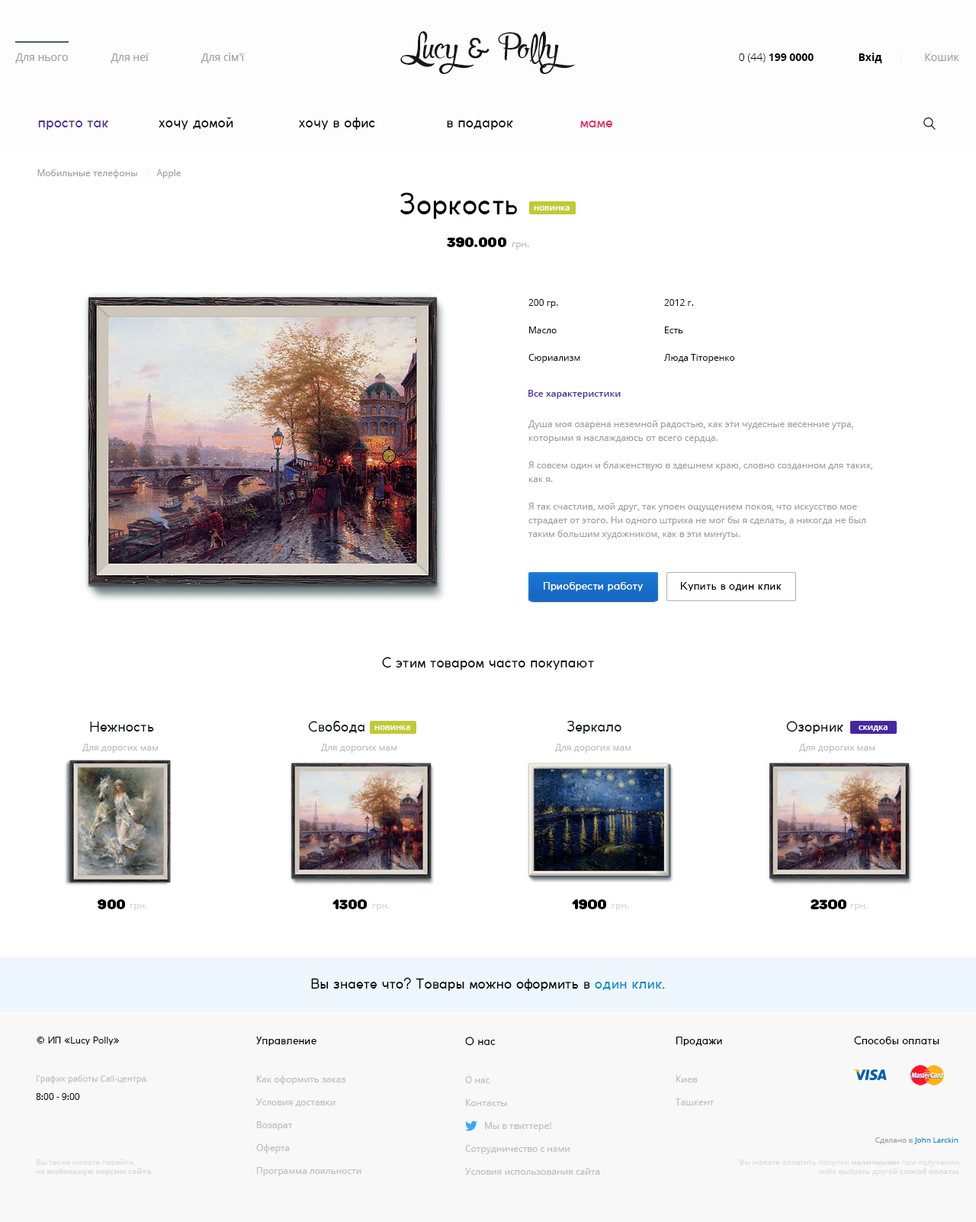
<style>
.page{position:relative;width:976px;height:1222px;background:#ffffff}
.page>*{position:absolute;margin:0}
.t1{font:27.5px "RupsterScriptFree";letter-spacing:-0.05em;color:#000000}
.t2{font:27.5px "CocoGothic";letter-spacing:-0.05em;color:#000000}
.t3{font:10.7px "OpenSans";color:#9e9e9e}
.t4{font:10.7px "OpenSans-Bold";color:#000000}
.t5{font:10.7px "OpenSans-Light";color:#000000}
.t6{font:13.7px "CocoGothic";color:#4527a0}
.t7{font:13.7px "CocoGothic";color:#000000}
.t8{font:13.7px "CocoGothic";color:#e91e63}
.t9{font:9.2px "OpenSans";color:#9e9e9e}
.t10{font:27.5px "CocoGothic";color:#000000}
.t11{font:8.4px "OpenSans-Semibold";color:#ffffff}
.t12{font:13.7px "RoundsBlack";color:#000000}
.t13{font:9.2px "OpenSans";color:#bdbdbd}
.t14{font:9.2px/13.7px "OpenSans";color:#0d1214}
.t15{font:9.2px/13.7px "OpenSans";color:#0c1012}
.t16{font:9.2px "OpenSans-Semibold";color:#4527a0}
.t17{font:9.2px/13.7px "OpenSans";color:#9e9e9e}
.t18{font:10.7px "CocoGothic";color:#ffffff}
.t19{font:10.7px "CocoGothic";color:#000000}
.t20{font:9.2px "OpenSans";color:#d4d4d4}
.t21{font:13.7px "CocoGothic";color:#0288d1}
.t22{font:9.2px "CocoGothic";color:#000000}
.t23{font:8.4px "OpenSans";color:#bdbdbd}
.t24{font:9.2px/22.9px "OpenSans";color:#bdbdbd}
.t25{font:9.2px "OpenSans";color:#000000}
.t26{font:7.6px "OpenSans";color:#0288d1}
.t27{font:7.6px "OpenSans";color:#9e9e9e}
.t28{font:7.6px "OpenSans";color:#dcdcdc}
.t29{font:7.6px "OpenSans-Bold";color:#dcdcdc}
</style>
<div class="page">
<p class="t1" style="left:400px;top:31px;width:175px;height:43px;opacity:0.96">Lucy <span class="t2">&amp;</span> Polly</p>
<p class="t3" style="left:15px;top:53px;width:53px;height:10px">Для нього</p>
<p class="t3" style="left:111px;top:53px;width:38px;height:10px">Для неї</p>
<p class="t3" style="left:201px;top:53px;width:44px;height:10px">Для сім'ї</p>
<p class="t4" style="left:739px;top:53px;width:75px;height:10px"><span class="t5">0 (44) </span>199 0000</p>
<p class="t4" style="left:859px;top:53px;width:23px;height:10px">Вхід</p>
<p class="t3" style="left:925px;top:53px;width:34px;height:8px">Кошик</p>
<p class="t6" style="left:38px;top:120px;width:70px;height:10px">просто так</p>
<p class="t7" style="left:159px;top:117px;width:74px;height:13px">хочу домой</p>
<p class="t7" style="left:299px;top:117px;width:76px;height:13px">хочу в офис</p>
<p class="t7" style="left:447px;top:120px;width:66px;height:10px">в подарок</p>
<p class="t8" style="left:580px;top:120px;width:33px;height:8px">маме</p>
<p class="t9" style="left:37px;top:169px;width:144px;height:9px">Мобильные телефоны        Apple</p>
<p class="t10" style="left:400px;top:192px;width:117px;height:27px">Зоркость</p>
<p class="t11" style="left:534px;top:206px;width:36px;height:4px">новинка</p>
<p class="t12" style="left:447px;top:237px;width:59px;height:10px">390.000</p>
<p class="t13" style="left:512px;top:242px;width:17px;height:7px">грн.</p>
<p class="t14" style="left:528px;top:299px;width:52px;height:64px">200 гр.<br><br>Масло<br><br>Сюриализм</p>
<p class="t15" style="left:663px;top:299px;width:72px;height:64px">2012 г.<br><br>Есть<br><br>Люда Тiторенко</p>
<p class="t16" style="left:528px;top:390px;width:93px;height:9px">Все характеристики</p>
<p class="t17" style="left:528px;top:420px;width:345px;height:119px">Душа моя озарена неземной радостью, как эти чудесные весенние утра, которыми я наслаждаюсь от всего сердца. <br><br>Я совсем один и блаженствую в здешнем краю, словно созданном для таких, как я. <br><br>Я так счастлив, мой друг, так упоен ощущением покоя, что искусство мое страдает от этого. Ни одного штриха не мог бы я сделать, а никогда не был таким большим художником, как в эти минуты.</p>
<p class="t18" style="left:544px;top:582px;width:100px;height:9px">Приобрести работу</p>
<p class="t19" style="left:681px;top:582px;width:101px;height:9px">Купить в один клик</p>
<p class="t7" style="left:382px;top:657px;width:212px;height:13px">С этим товаром часто покупают</p>
<p class="t7" style="left:90px;top:721px;width:64px;height:11px">Нежность</p>
<p class="t7" style="left:308px;top:721px;width:57px;height:12px">Свобода</p>
<p class="t11" style="left:374px;top:725px;width:36px;height:5px">новинка</p>
<p class="t7" style="left:567px;top:721px;width:54px;height:13px">Зеркало</p>
<p class="t7" style="left:786px;top:721px;width:57px;height:13px">Озорник</p>
<p class="t11" style="left:859px;top:725px;width:29px;height:6px">скидка</p>
<p class="t13" style="left:82px;top:744px;width:77px;height:9px">Для дорогих мам</p>
<p class="t13" style="left:321px;top:744px;width:76px;height:9px">Для дорогих мам</p>
<p class="t13" style="left:555px;top:744px;width:76px;height:9px">Для дорогих мам</p>
<p class="t13" style="left:799px;top:744px;width:76px;height:9px">Для дорогих мам</p>
<p class="t12" style="left:98px;top:899px;width:27px;height:10px">900</p>
<p class="t20" style="left:130px;top:904px;width:17px;height:7px">грн.</p>
<p class="t12" style="left:332px;top:899px;width:35px;height:10px">1300</p>
<p class="t20" style="left:372px;top:904px;width:18px;height:7px">грн.</p>
<p class="t12" style="left:572px;top:899px;width:34px;height:10px">1900</p>
<p class="t20" style="left:612px;top:904px;width:17px;height:7px">грн.</p>
<p class="t12" style="left:811px;top:899px;width:35px;height:10px">2300</p>
<p class="t20" style="left:850px;top:904px;width:18px;height:7px">грн.</p>
<p class="t7" style="left:311px;top:977px;width:354px;height:14px">Вы знаете что? Товары можно оформить в<span class="t21"> один клик.</span></p>
<p class="t22" style="left:37px;top:1036px;width:83px;height:9px">© ИП «Lucy Polly»</p>
<p class="t19" style="left:256px;top:1036px;width:60px;height:9px">Управление</p>
<p class="t19" style="left:465px;top:1036px;width:31px;height:9px">О нас</p>
<p class="t19" style="left:676px;top:1036px;width:46px;height:9px">Продажи</p>
<p class="t19" style="left:854px;top:1036px;width:85px;height:9px">Способы оплаты</p>
<p class="t23" style="left:37px;top:1075px;width:111px;height:9px">График работы Call-центра.</p>
<p class="t24" style="left:256px;top:1075px;width:105px;height:101px">Как оформить заказ<br>Условия доставки<br>Возврат<br>Оферта<br>Программа лояльности</p>
<p class="t24" style="left:465px;top:1076px;width:135px;height:98px">О нас<br>Контакты<br>        Мы в твиттере!<br>Сотрудничество с нами<br>Условия использования сайта</p>
<p class="t24" style="left:676px;top:1075px;width:38px;height:30px">Киев<br>Ташкент</p>
<p class="t25" style="left:36px;top:1093px;width:44px;height:7px">8:00 - 9:00</p>
<p class="t26" style="left:875px;top:1137px;width:84px;height:7px"><span class="t27">Сделано в</span> John Larckin</p>
<p class="t28" style="left:36px;top:1158px;width:117px;height:17px">Вы также можете перейти, <br>на <span class="t29">мобильную версию сайта.</span></p>
<p class="t28" style="left:740px;top:1159px;width:221px;height:16px;text-align:right">Вы можете оплатить покупки <span class="t29">наличными </span>при получении, <br>либо выбрать другой <span class="t29">способ оплаты</span>.</p>
</div>
